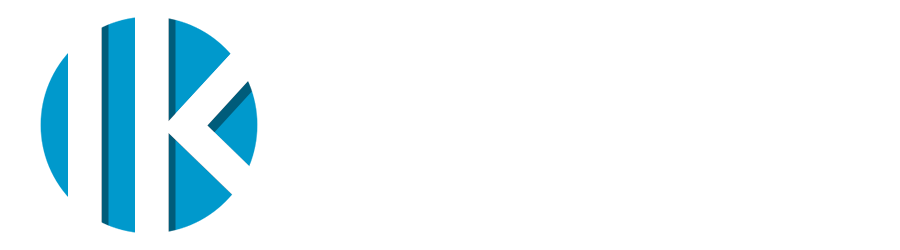
<style>
.page{position:relative;width:900px;height:250px;background:#ffffff}
.page>*{position:absolute;margin:0}
.t1{font:341.7px "GillSans";letter-spacing:-0.055em;color:#ffffff}
</style>
<div class="page">
<p class="t1" style="left:68px;top:15px;width:266px;height:233px">IK</p>
</div>
